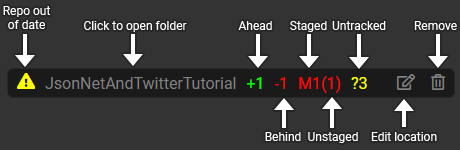
<style>
.page{position:relative;width:460px;height:150px;background:#333333}
.page>*{position:absolute;margin:0}
.t1{font:12px "Roboto-Regular";color:#ffffff}
</style>
<div class="page">
<p class="t1" style="left:3px;top:6px;width:48px;height:23px;text-align:center">Repo out<br>of date</p>
<p class="t1" style="left:84px;top:21px;width:103px;height:11px">Click to open folder</p>
<p class="t1" style="left:238px;top:21px;width:34px;height:9px">Ahead</p>
<p class="t1" style="left:290px;top:21px;width:37px;height:11px">Staged</p>
<p class="t1" style="left:332px;top:21px;width:54px;height:9px">Untracked</p>
<p class="t1" style="left:414px;top:21px;width:43px;height:9px">Remove</p>
<p class="t1" style="left:265px;top:132px;width:36px;height:9px">Behind</p>
<p class="t1" style="left:308px;top:132px;width:50px;height:11px">Unstaged</p>
<p class="t1" style="left:371px;top:132px;width:66px;height:9px">Edit location</p>
</div>
